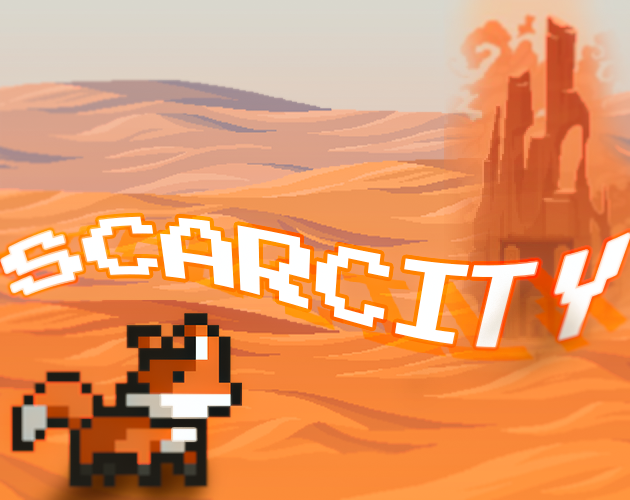
<style>
.page{position:relative;width:630px;height:500px}
.page>*{position:absolute;margin:0}
.t1{font:140px "ArcadeClassic";color:#ffffff;text-transform:uppercase}
</style>
<div class="page">
<p class="t1" style="left:1px;top:216px;width:629px;height:131px">Scarcity</p>
</div>
